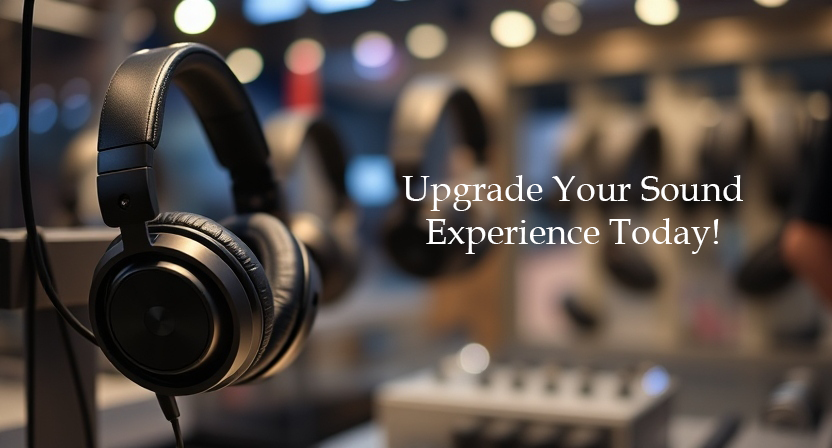
<style>
.page{position:relative;width:832px;height:448px}
.page>*{position:absolute;margin:0}
.t1{font:36px "BookAntiqua";color:#ffffff}
</style>
<div class="page">
<p class="t1" style="left:402px;top:175px;width:341px;height:79px;text-align:center">Upgrade Your Sound Experience Today!</p>
</div>
